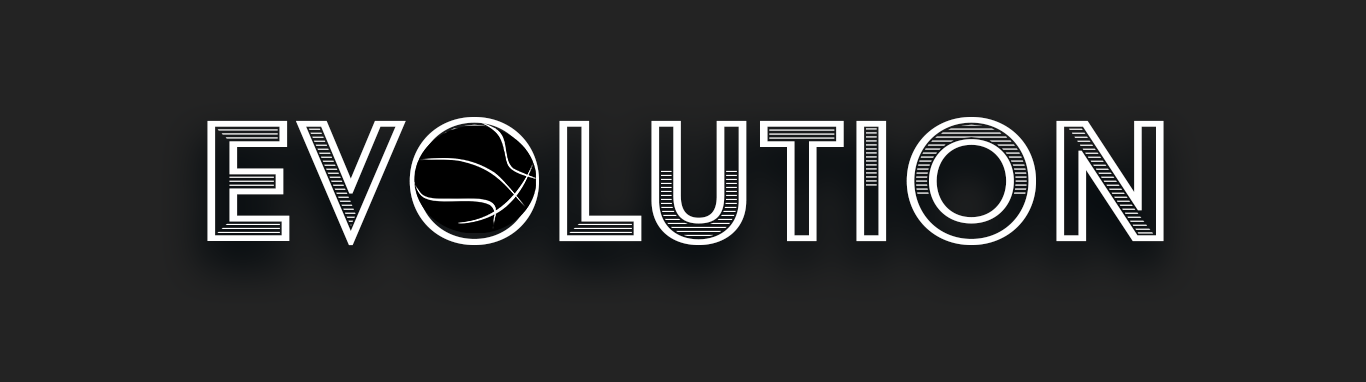
<style>
.page{position:relative;width:1366px;height:382px;background:#232323}
.page>*{position:absolute;margin:0}
.t1{font:200px "AcierBATText-Gris";color:#ffffff}
</style>
<div class="page">
<p class="t1" style="left:207px;top:116px;width:957px;height:130px">Evolution</p>
</div>
